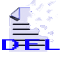
<style>
.page{position:relative;width:60px;height:60px;background:#ffffff}
.page>*{position:absolute;margin:0}
.t1{font:17.4px "WST_Engl";color:#0d01ff;scale:1.53 1}
</style>
<div class="page">
<p class="t1" style="left:2px;top:39px;width:58px;height:11px">DEL</p>
</div>
